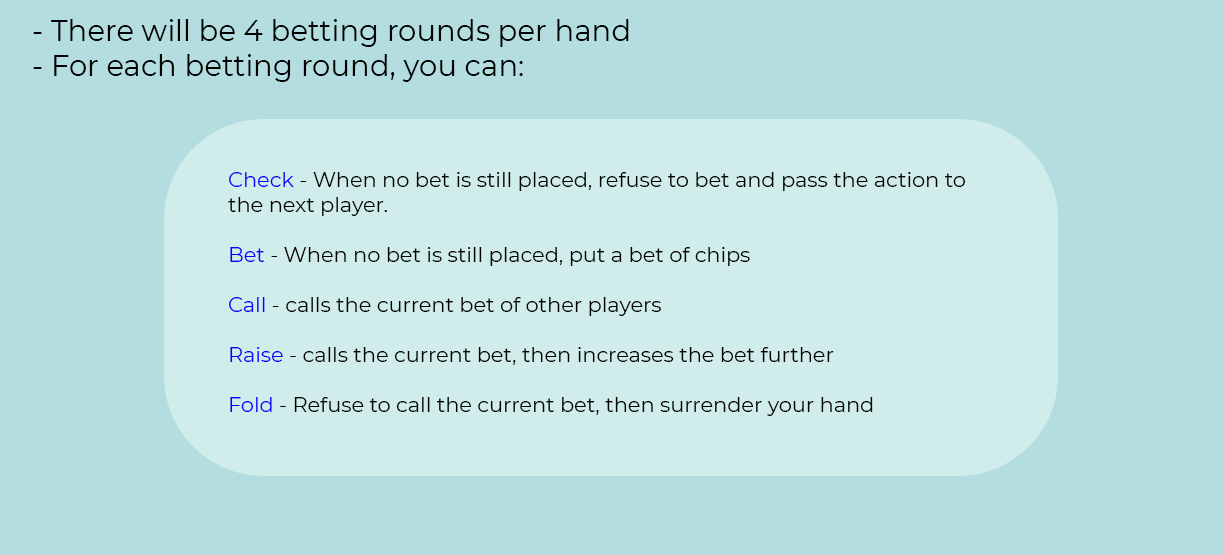
<style>
.page{position:relative;width:1224px;height:555px;background:#b4dddf}
.page>*{position:absolute;margin:0}
.t1{font:29.2px "Montserrat-Regular";color:#000000}
.t2{font:20.8px "Montserrat-Regular";color:#000000}
.t3{font:20.8px "Montserrat-Regular";color:#0c00ff}
</style>
<div class="page">
<p class="t1" style="left:33px;top:19px;width:596px;height:63px;text-align:right">- There will be 4 betting rounds per hand<br>- For each betting round, you can:</p>
<p class="t2" style="left:228px;top:172px;width:738px;height:244px;text-align:right"><span class="t3">Check </span>- When no bet is still placed, refuse to bet and pass the action to the next player.<br><br><span class="t3">Bet </span>- When no bet is still placed, put a bet of chips<br><br><span class="t3">Call </span>- calls the current bet of other players<br><br><span class="t3">Raise </span>- calls the current bet, then increases the bet further<br><br><span class="t3">Fold </span>- Refuse to call the current bet, then surrender your hand</p>
</div>
